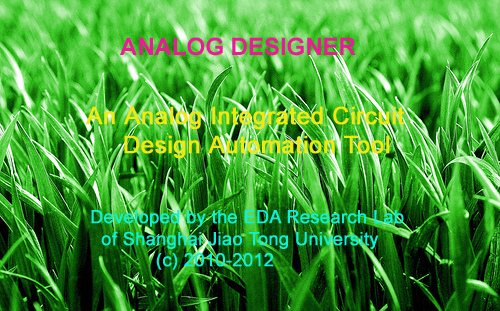
<style>
.page{position:relative;width:500px;height:311px}
.page>*{position:absolute;margin:0}
.t1{font:24px "Arial-BoldMT";color:#ee1996}
.t2{font:24px "ArialMT";color:#f0e80e;font-weight:bold}
.t3{font:18px "ArialMT";color:#0ef0d8;font-weight:bold}
</style>
<div class="page">
<p class="t1" style="left:120px;top:37px;width:236px;height:19px">ANALOG DESIGNER</p>
<p class="t2" style="left:86px;top:106px;width:319px;height:53px">An Analog Integrated Circuit<br>     Design Automation Tool</p>
<p class="t3" style="left:91px;top:210px;width:313px;height:60px">Developed by the EDA Research Lab<br>  of Shanghai Jiao Tong University<br>            (c) 2010-2012</p>
</div>
